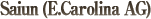
<style>
.page{position:relative;width:151px;height:19px;background:#ffffff}
.page>*{position:absolute;margin:0}
.t1{font:18px "RyuminPro-ExBold";letter-spacing:-0.08em;color:#4a3f32;font-weight:bold;scale:0.88 1}
</style>
<div class="page">
<p class="t1" style="left:0px;top:1px;width:151px;height:18px">Saiun (E.Carolina AG)</p>
</div>
